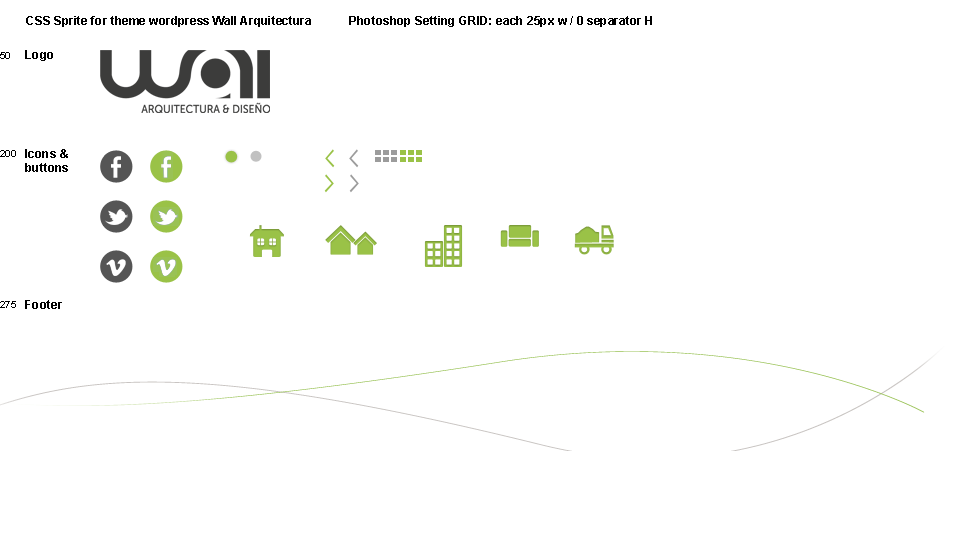
<style>
.page{position:relative;width:960px;height:549px;background:#ffffff}
.page>*{position:absolute;margin:0}
.t1{font:12px "Arial-BoldMT";color:#000000}
.t2{font:10px "ArialMT";color:#000000}
.t3{font:12px/14px "Arial-BoldMT";color:#000000}
</style>
<div class="page">
<p class="t1" style="left:26px;top:16px;width:285px;height:11px">CSS Sprite for theme wordpress Wall Arquitectura</p>
<p class="t1" style="left:349px;top:16px;width:303px;height:11px">Photoshop Setting GRID: each 25px w / 0 separator H</p>
<p class="t2" style="left:0px;top:52px;width:10px;height:7px">50</p>
<p class="t1" style="left:25px;top:50px;width:28px;height:11px">Logo</p>
<p class="t2" style="left:0px;top:150px;width:16px;height:7px">200</p>
<p class="t3" style="left:25px;top:149px;width:43px;height:23px">Icons &amp;<br>buttons</p>
<p class="t2" style="left:0px;top:301px;width:16px;height:7px">275</p>
<p class="t1" style="left:25px;top:300px;width:37px;height:9px">Footer</p>
</div>
